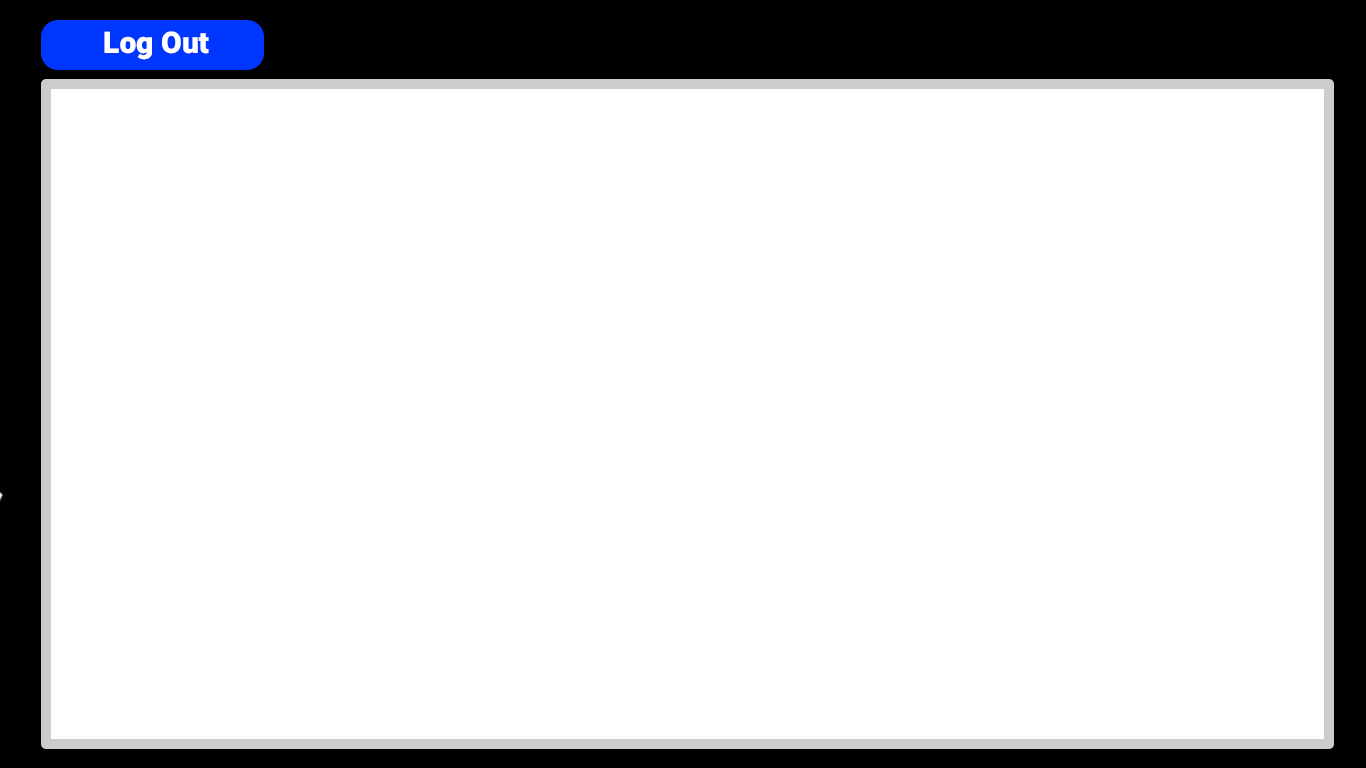
<style>
.page{position:relative;width:1366px;height:768px;background:#ffffff}
.page>*{position:absolute;margin:0}
.t1{font:30px "Heebo-Black";color:#ffffff}
</style>
<div class="page">
<p class="t1" style="left:104px;top:31px;width:105px;height:29px">Log Out</p>
</div>
